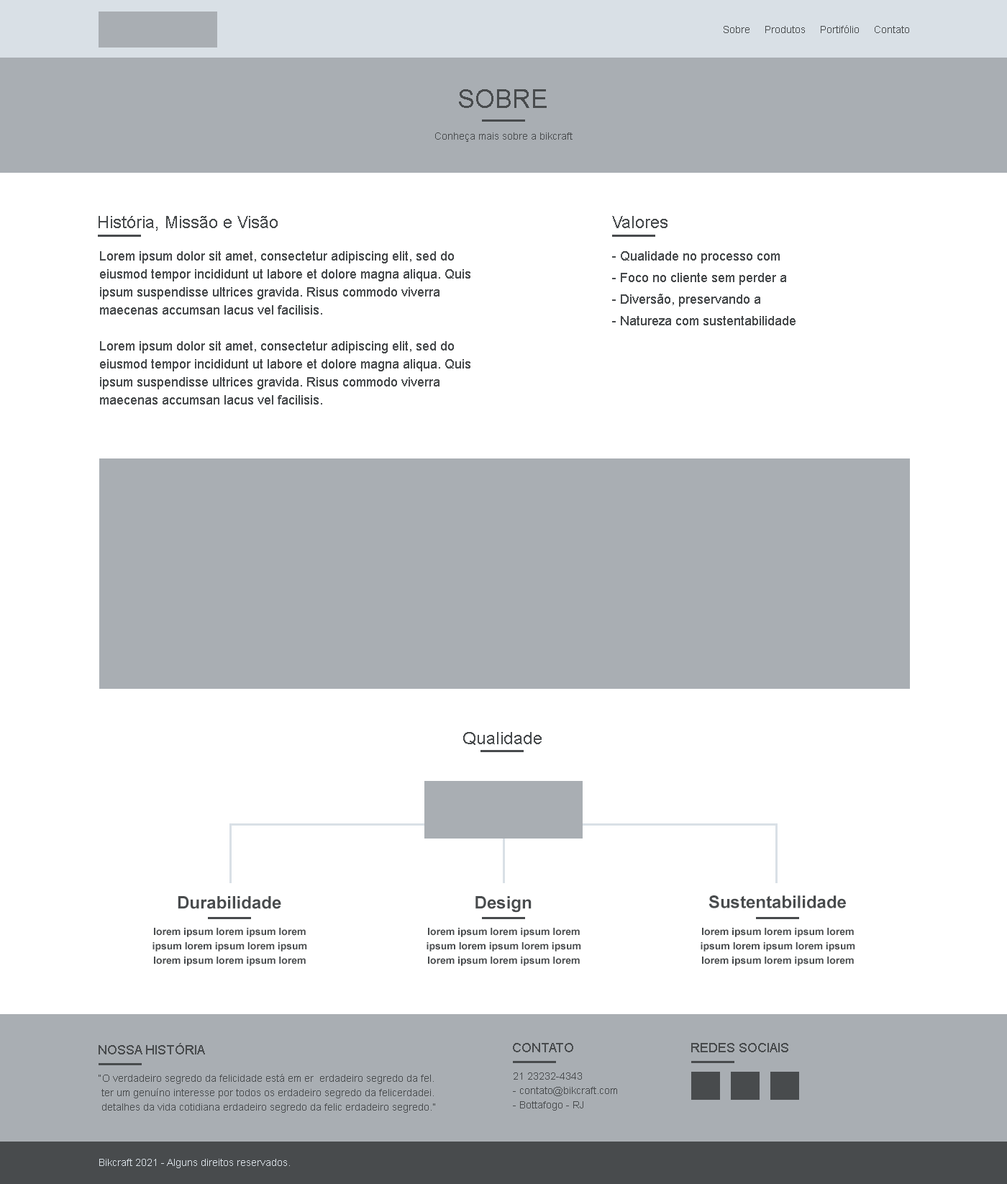
<style>
.page{position:relative;width:1007px;height:1184px;background:#ffffff}
.page>*{position:absolute;margin:0}
.t1{font:10.1px "ArialMT";color:#484b4d}
.t2{font:25.9px "ArialMT";color:#484b4d;text-transform:uppercase}
.t3{font:17.3px "ArialMT";color:#484b4d}
.t4{font:13px/18px "ArialMT";color:#484b4d}
.t5{font:13px/21.6px "ArialMT";color:#484b4d}
.t6{font:17.3px "Arial-BoldMT";color:#484b4d}
.t7{font:10.1px/14.4px "Arial-BoldMT";color:#484b4d}
.t8{font:13px "ArialMT";color:#484b4d}
.t9{font:10.1px/14.4px "ArialMT";color:#484b4d}
.t10{font:10.1px "ArialMT";color:#d9e0e6}
</style>
<div class="page">
<p class="t1" style="left:724px;top:25px;width:186px;height:8px">Sobre     Produtos     Portifólio     Contato</p>
<p class="t2" style="left:459px;top:89px;width:88px;height:19px">Sobre</p>
<p class="t1" style="left:435px;top:132px;width:138px;height:10px">Conheça mais sobre a bikcraft</p>
<p class="t3" style="left:99px;top:216px;width:179px;height:15px">História, Missão e Visão</p>
<p class="t3" style="left:612px;top:216px;width:56px;height:12px">Valores</p>
<p class="t4" style="left:100px;top:251px;width:371px;height:153px">Lorem ipsum dolor sit amet, consectetur adipiscing elit, sed do eiusmod tempor incididunt ut labore et dolore magna aliqua. Quis ipsum suspendisse ultrices gravida. Risus commodo viverra maecenas accumsan lacus vel facilisis. <br><br>Lorem ipsum dolor sit amet, consectetur adipiscing elit, sed do eiusmod tempor incididunt ut labore et dolore magna aliqua. Quis ipsum suspendisse ultrices gravida. Risus commodo viverra maecenas accumsan lacus vel facilisis.</p>
<p class="t5" style="left:612px;top:251px;width:184px;height:74px">- Qualidade no processo com <br>- Foco no cliente sem perder a<br>- Diversão, preservando a <br>- Natureza com sustentabilidade</p>
<p class="t3" style="left:463px;top:732px;width:79px;height:13px">Qualidade</p>
<p class="t6" style="left:178px;top:896px;width:103px;height:13px">Durabilidade</p>
<p class="t6" style="left:476px;top:896px;width:56px;height:16px">Design</p>
<p class="t6" style="left:709px;top:895px;width:137px;height:13px">Sustentabilidade</p>
<p class="t7" style="left:153px;top:928px;width:154px;height:38px;text-align:center">lorem ipsum lorem ipsum lorem ipsum lorem ipsum lorem ipsum lorem ipsum lorem ipsum lorem ipsumloremipsum</p>
<p class="t7" style="left:427px;top:928px;width:154px;height:38px;text-align:center">lorem ipsum lorem ipsum lorem ipsum lorem ipsum lorem ipsum lorem ipsum lorem ipsum lorem ipsumloremipsum</p>
<p class="t7" style="left:701px;top:928px;width:155px;height:38px;text-align:center">lorem ipsum lorem ipsum lorem ipsum lorem ipsum lorem ipsum lorem ipsum lorem ipsum lorem ipsumloremipsum</p>
<p class="t8" style="left:99px;top:1043px;width:106px;height:11px">NOSSA HISTÓRIA</p>
<p class="t8" style="left:513px;top:1043px;width:60px;height:9px">CONTATO</p>
<p class="t8" style="left:692px;top:1043px;width:97px;height:9px">REDES SOCIAIS</p>
<p class="t9" style="left:99px;top:1074px;width:336px;height:38px">“O verdadeiro segredo da felicidade está em er  erdadeiro segredo da fel.  <br> ter um genuíno interesse por todos os erdadeiro segredo da felicerdadei.<br> detalhes da vida cotidiana erdadeiro segredo da felic erdadeiro segredo.”</p>
<p class="t9" style="left:513px;top:1072px;width:104px;height:38px">21 23232-4343<br>- contato@bikcraft.com<br>- Bottafogo - RJ</p>
<p class="t10" style="left:99px;top:1158px;width:191px;height:10px">Bikcraft 2021 - Alguns direitos reservados.</p>
</div>
